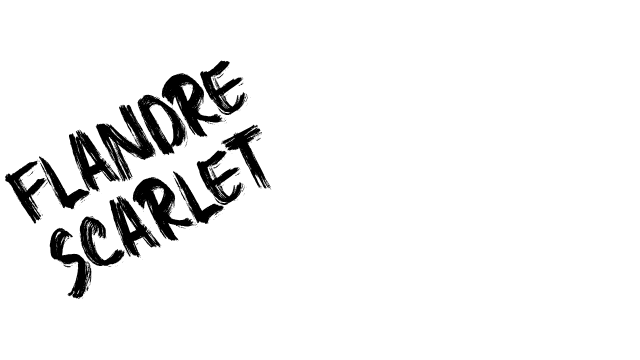
<style>
.page{position:relative;width:640px;height:360px;background:#ffffff}
.page>*{position:absolute;margin:0}
.t1{font:39.1px/28.3px "HigherJump";color:#000000;scale:0.9 1}
</style>
<div class="page">
<p class="t1" style="left:5px;top:60px;width:267px;height:239px;rotate:-29deg">Flandre<br>Scarlet</p>
</div>
